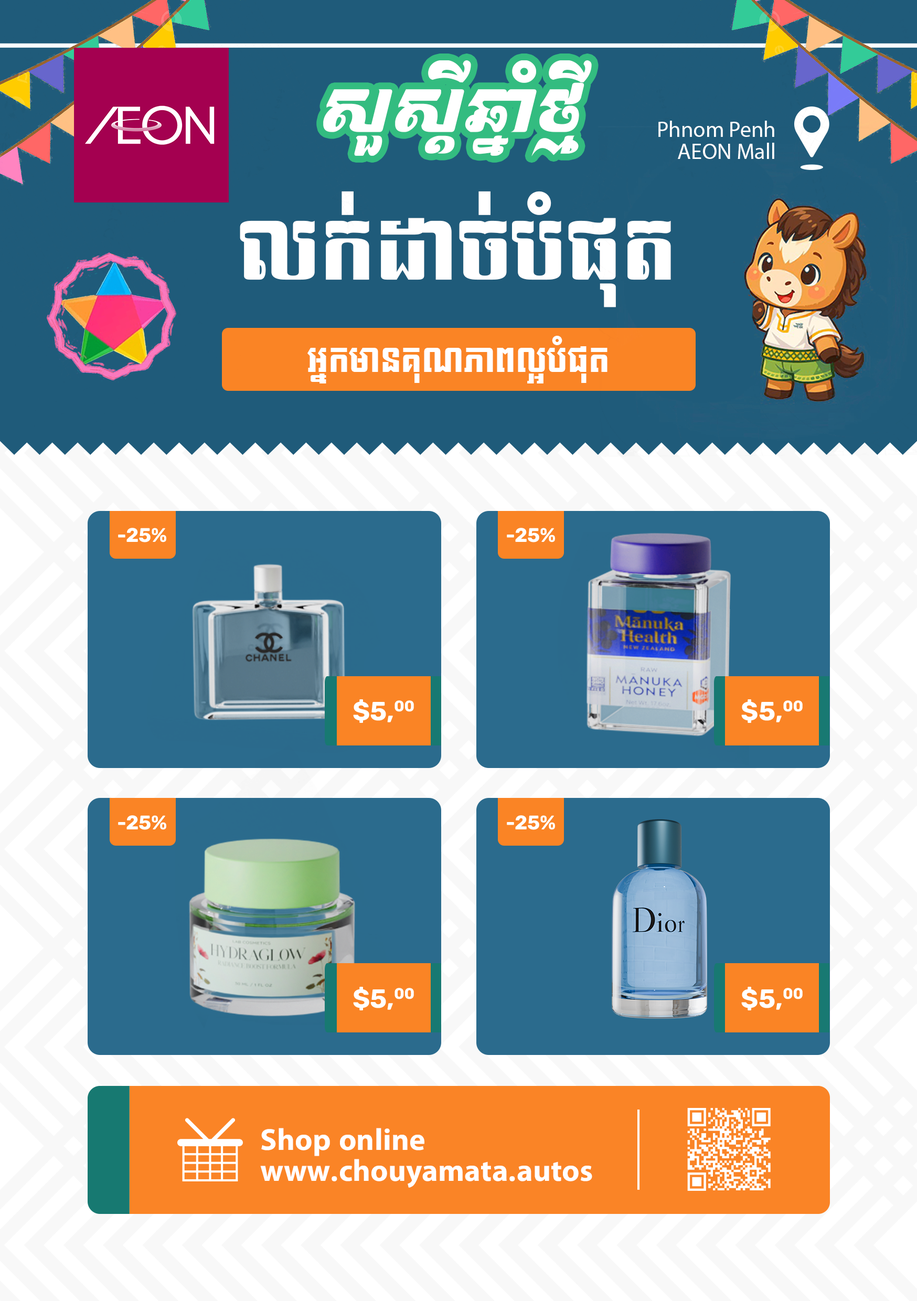
<style>
.page{position:relative;width:917px;height:1301px}
.page>*{position:absolute;margin:0}
.t1{font:67px "Kh-Ang-ChittBous";color:#ffffff}
.t2{font:22.3px/22.3px "MyriadPro-Regular";color:#ffffff}
.t3{font:80.1px "AKbalthomTestFont2019";color:#ffffff}
.t4{font:32.8px "Koulen";color:#ffffff}
.t5{font:19.7px "Rubik-Bold";color:#ffffff}
.t6{font:26.2px "Rubik-Bold";color:#ffffff}
.t7{font:30.6px/30.6px "iKampuchea001_O'Chrov";color:#ffffff}
</style>
<div class="page">
<p class="t1" style="left:323px;top:60px;width:269px;height:96px">សួស្តីឆ្នាំថ្មី</p>
<p class="t2" style="left:658px;top:121px;width:116px;height:38px;text-align:right">Phnom Penh<br>AEON Mall</p>
<p class="t3" style="left:240px;top:191px;width:431px;height:116px">លក់ដាច់បំផុត</p>
<p class="t4" style="left:307px;top:336px;width:300px;height:47px">អ្នកមានគុណភាពល្អបំផុត</p>
<p class="t5" style="left:118px;top:528px;width:48px;height:14px">-25%</p>
<p class="t5" style="left:507px;top:528px;width:48px;height:14px">-25%</p>
<p class="t6" style="left:353px;top:699px;width:61px;height:24px">$5,00</p>
<p class="t6" style="left:741px;top:699px;width:61px;height:24px">$5,00</p>
<p class="t5" style="left:118px;top:815px;width:48px;height:15px">-25%</p>
<p class="t5" style="left:507px;top:815px;width:48px;height:15px">-25%</p>
<p class="t6" style="left:353px;top:987px;width:61px;height:23px">$5,00</p>
<p class="t6" style="left:741px;top:987px;width:61px;height:23px">$5,00</p>
<p class="t7" style="left:260px;top:1128px;width:332px;height:59px">Shop online<br>www.chouyamata.autos</p>
</div>
